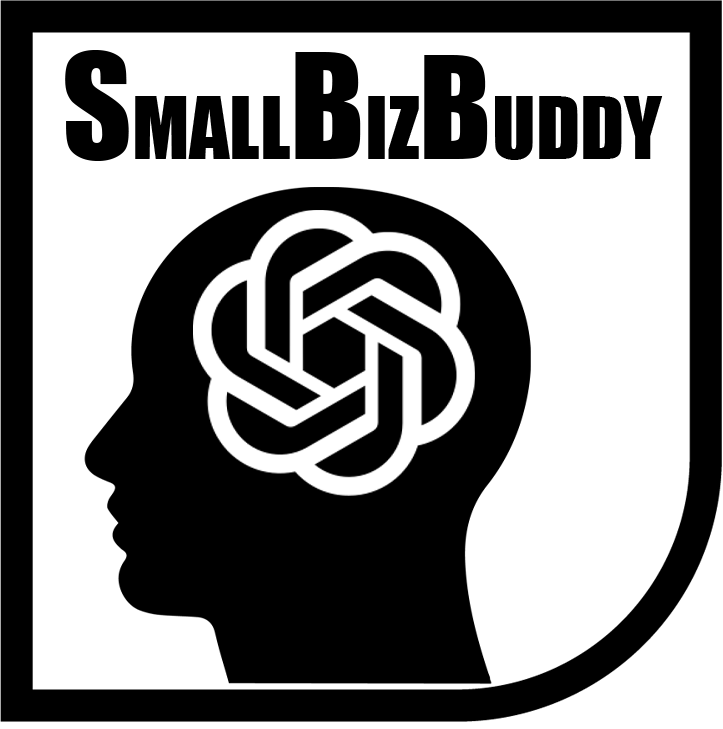
<style>
.page{position:relative;width:723px;height:729px;background:#ffffff}
.page>*{position:absolute;margin:0}
.t1{font:79.9px "Impact";color:#000000}
.t2{font:135.1px "Impact";color:#000000}
.t3{font:131.2px "Impact";color:#000000}
</style>
<div class="page">
<p class="t1" style="left:65px;top:50px;width:598px;height:111px"><span class="t2">S</span>MALL<span class="t2">B</span>IZ<span class="t3">B</span>UDDY</p>
</div>
